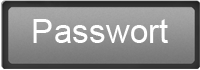
<style>
.page{position:relative;width:200px;height:70px}
.page>*{position:absolute;margin:0}
.t1{font:33.3px "ArialMT";color:#ffffff}
</style>
<div class="page">
<p class="t1" style="left:33px;top:19px;width:135px;height:24px">Passwort</p>
</div>
